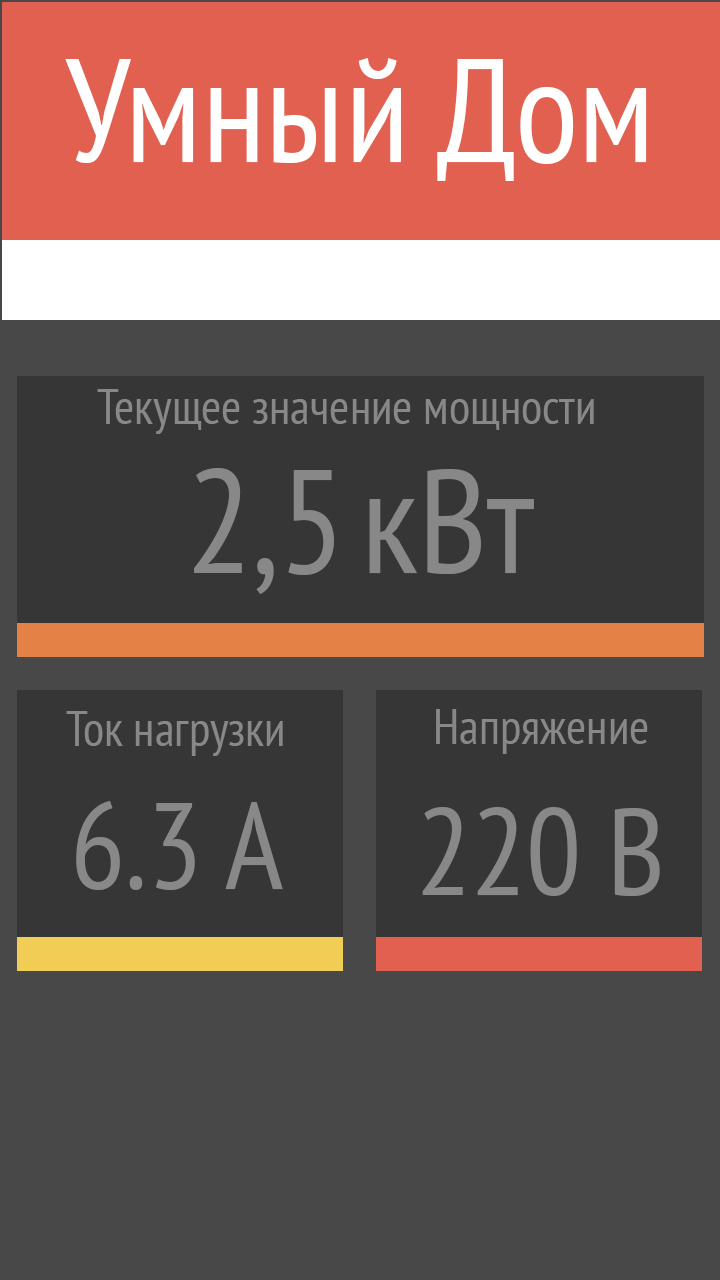
<style>
.page{position:relative;width:720px;height:1280px;background:#484848}
.page>*{position:absolute;margin:0}
.t1{font:147px "PTSans-Narrow";color:#ffffff}
.t2{font:49px "PTSans-Narrow";color:#888888}
.t3{font:147px "PTSans-Narrow";color:#888888}
.t4{font:122.5px "PTSans-Narrow";color:#888888}
</style>
<div class="page">
<p class="t1" style="left:65px;top:58px;width:582px;height:123px">Умный Дом</p>
<p class="t2" style="left:97px;top:389px;width:497px;height:45px">Текущее значение мощности</p>
<p class="t3" style="left:194px;top:468px;width:340px;height:126px">2,5 кВт</p>
<p class="t2" style="left:66px;top:711px;width:217px;height:45px">Ток нагрузки</p>
<p class="t2" style="left:436px;top:709px;width:212px;height:45px">Напряжение</p>
<p class="t4" style="left:76px;top:801px;width:207px;height:89px">6.3 А</p>
<p class="t4" style="left:422px;top:807px;width:238px;height:89px">220 В</p>
</div>
